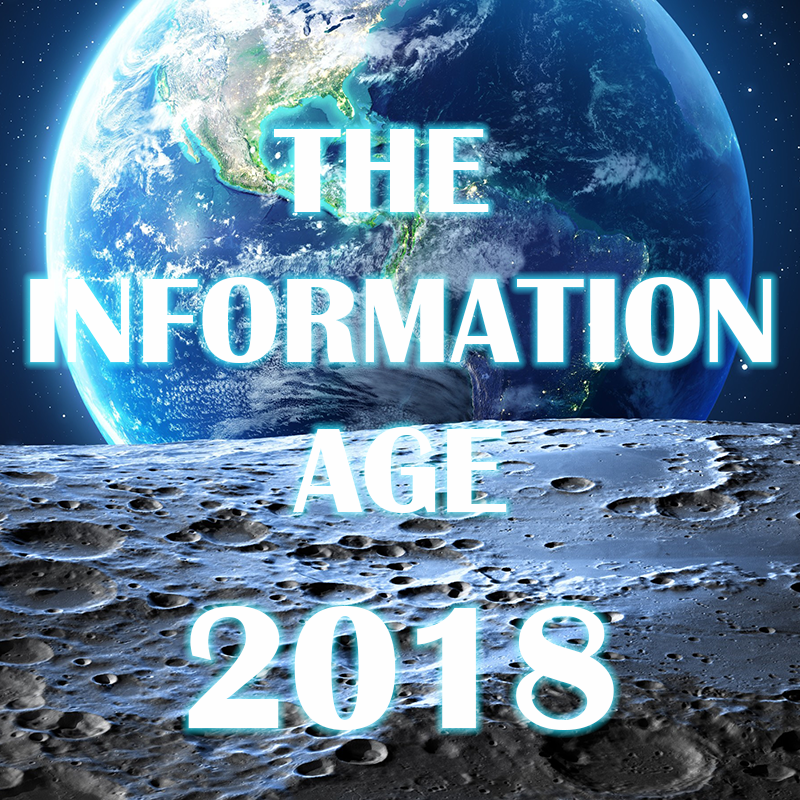
<style>
.page{position:relative;width:800px;height:800px}
.page>*{position:absolute;margin:0}
.t1{font:125px "BritannicBold";color:#fefefe}
.t2{font:180px "BritannicBold";color:#fefefe}
</style>
<div class="page">
<p class="t1" style="left:30px;top:129px;width:742px;height:601px;text-align:center">THE <br>INFORMATION<br>AGE<br><span class="t2">2018</span></p>
</div>
